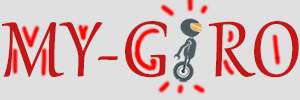
<style>
.page{position:relative;width:300px;height:100px;background:#e0e0e0}
.page>*{position:absolute;margin:0}
.t1{font:95.8px "Gabriola";color:#c31717}
</style>
<div class="page">
<p class="t1" style="left:2px;top:21px;width:297px;height:57px">MY-G  RO</p>
</div>
